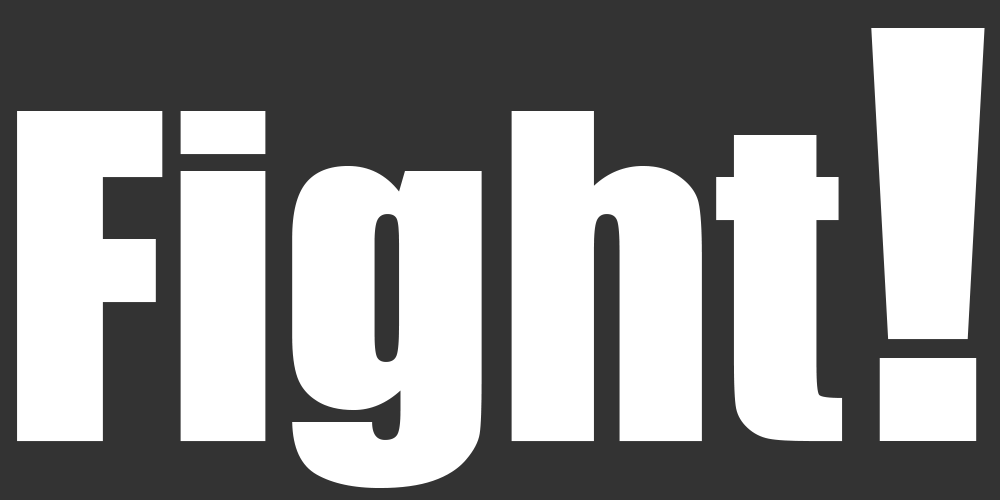
<style>
.page{position:relative;width:1000px;height:500px;background:#333333}
.page>*{position:absolute;margin:0}
.t1{font:417.1px "Impact";color:#ffffff}
.t2{font:522px "Impact";color:#ffffff}
</style>
<div class="page">
<p class="t1" style="left:17px;top:28px;width:968px;height:460px">Fight <span class="t2">!</span></p>
</div>
